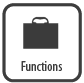
<style>
.page{position:relative;width:84px;height:83px;background:#ffffff}
.page>*{position:absolute;margin:0}
.t1{font:14px "MyriadPro-Cond";color:#3e3e3e}
</style>
<div class="page">
<p class="t1" style="left:21px;top:61px;width:41px;height:10px">Functions</p>
</div>
